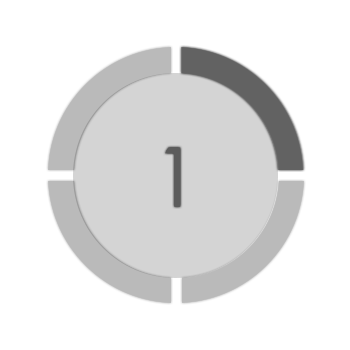
<style>
.page{position:relative;width:350px;height:350px;background:#ffffff}
.page>*{position:absolute;margin:0}
.t1{font:82.4px "CenturyGothic";color:#5c5c5c}
</style>
<div class="page">
<p class="t1" style="left:165px;top:147px;width:16px;height:60px">1</p>
</div>
